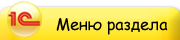
<style>
.page{position:relative;width:180px;height:40px}
.page>*{position:absolute;margin:0}
.t1{font:16px "ComicSansMS";color:#000000}
</style>
<div class="page">
<p class="t1" style="left:56px;top:18px;width:112px;height:17px">Меню раздела</p>
</div>
